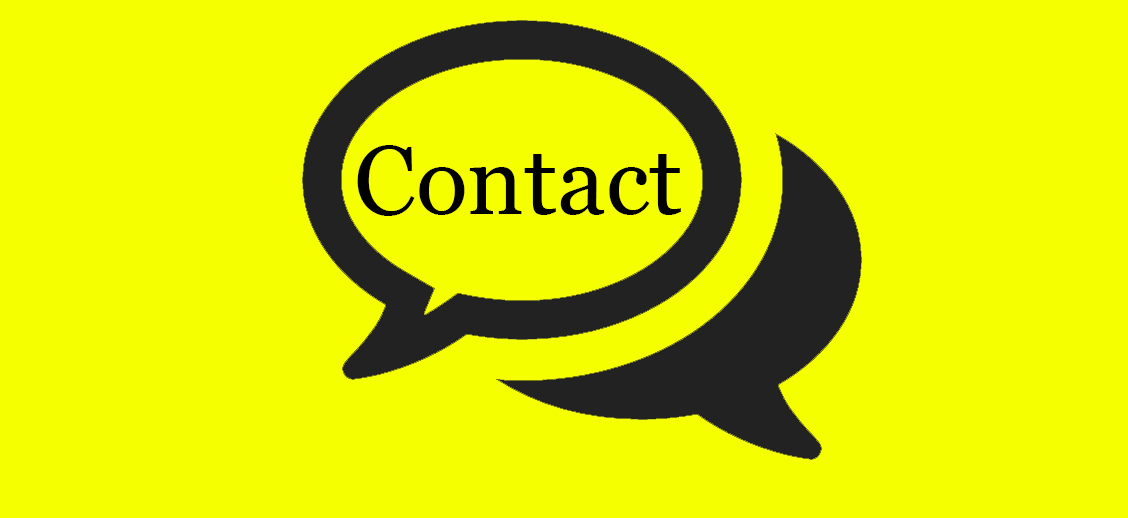
<style>
.page{position:relative;width:1128px;height:518px;background:#f6ff00}
.page>*{position:absolute;margin:0}
.t1{font:96px "Georgia";color:#000000}
</style>
<div class="page">
<p class="t1" style="left:357px;top:145px;width:324px;height:71px">Contact</p>
</div>
